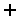
<style>
.page{position:relative;width:20px;height:20px;background:#ffffff}
.page>*{position:absolute;margin:0}
.t1{font:24px "ArialMT";color:#000000}
</style>
<div class="page">
<p class="t1" style="left:4px;top:4px;width:12px;height:12px">+</p>
</div>
